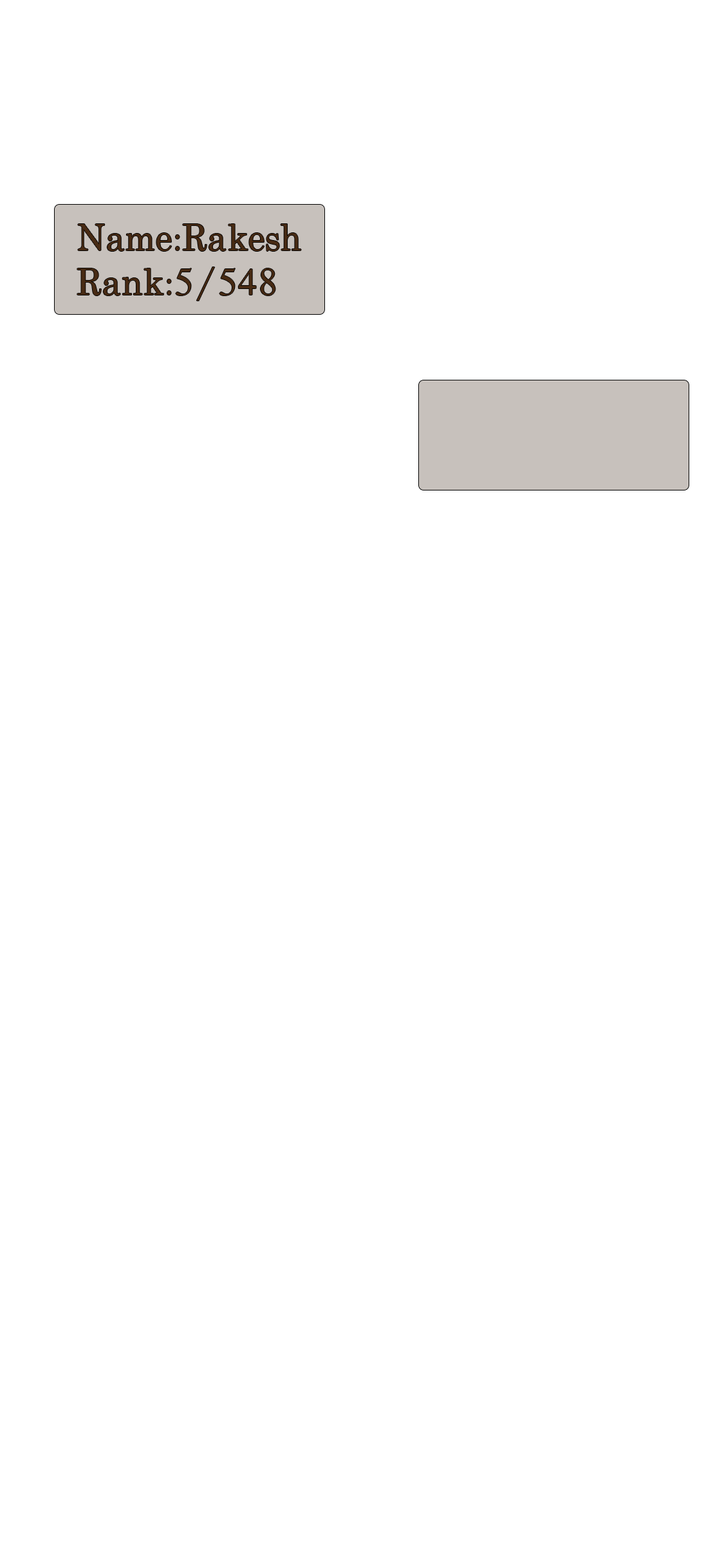
<style>
.page{position:relative;width:724px;height:1568px;background:#ffffff}
.page>*{position:absolute;margin:0}
.t1{font:38.1px "Mandali";letter-spacing:0.01em;color:#482b14;scale:0.95 1}
.t2{font:38.1px "Mandali";letter-spacing:0.01em;color:#482b14;text-transform:uppercase;scale:0.95 1}
</style>
<div class="page">
<p class="t1" style="left:78px;top:224px;width:223px;height:27px">Name<span class="t2">:</span>Rakesh</p>
<p class="t2" style="left:77px;top:267px;width:198px;height:34px"><span class="t1">Rank</span>:5/548</p>
</div>
